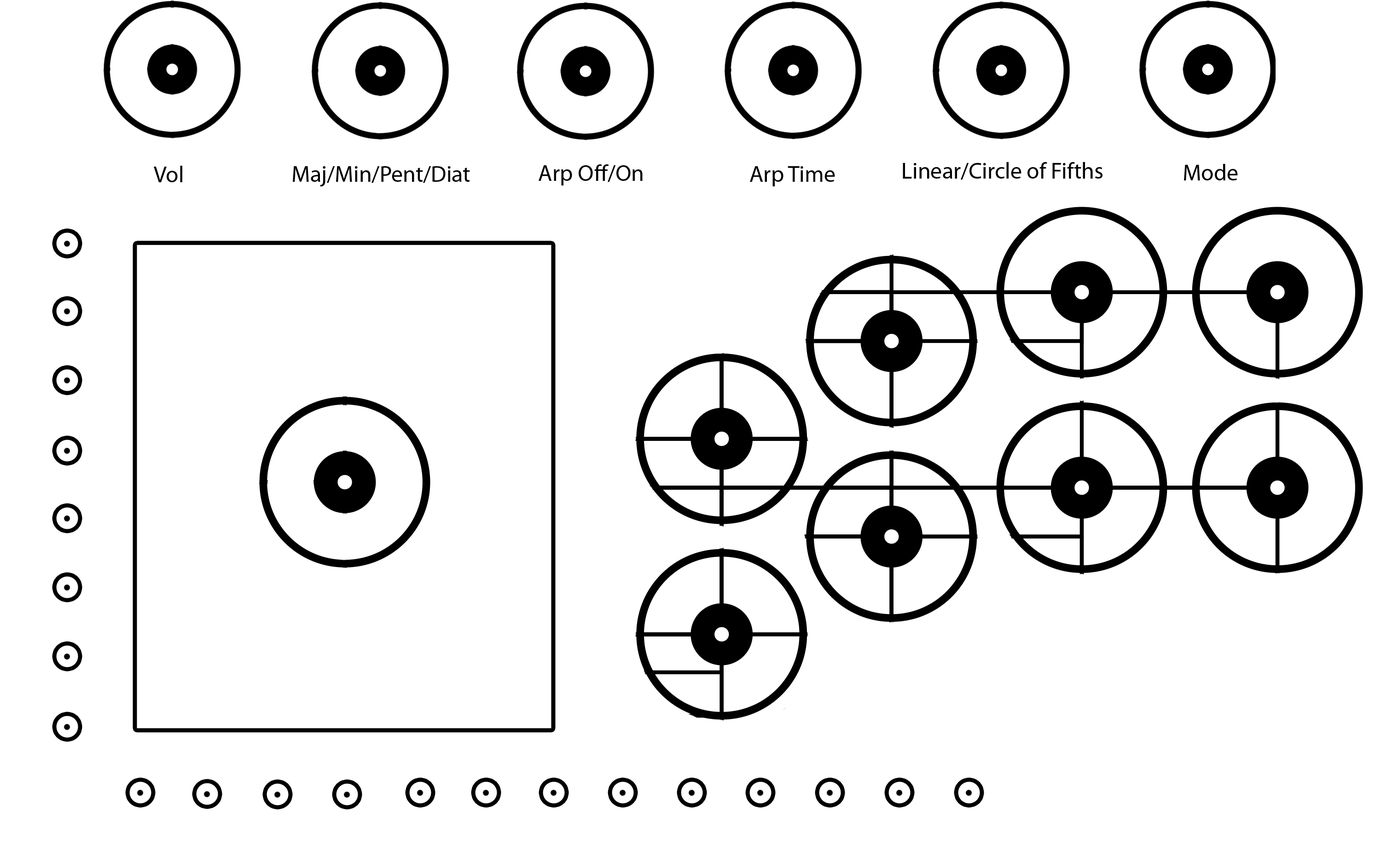
<style>
.page{position:relative;width:1381px;height:863px;background:#ffffff}
.page>*{position:absolute;margin:0}
.t1{font:23px "MyriadPro-Regular";color:#000000}
</style>
<div class="page">
<p class="t1" style="left:154px;top:166px;width:28px;height:16px">Vol</p>
<p class="t1" style="left:293px;top:166px;width:177px;height:21px">Maj/Min/Pent/Diat</p>
<p class="t1" style="left:539px;top:164px;width:104px;height:22px">Arp Off/On</p>
<p class="t1" style="left:750px;top:166px;width:85px;height:20px">Arp Time</p>
<p class="t1" style="left:903px;top:162px;width:200px;height:18px">Linear/Circle of Fifths</p>
<p class="t1" style="left:1184px;top:164px;width:54px;height:16px">Mode</p>
</div>
